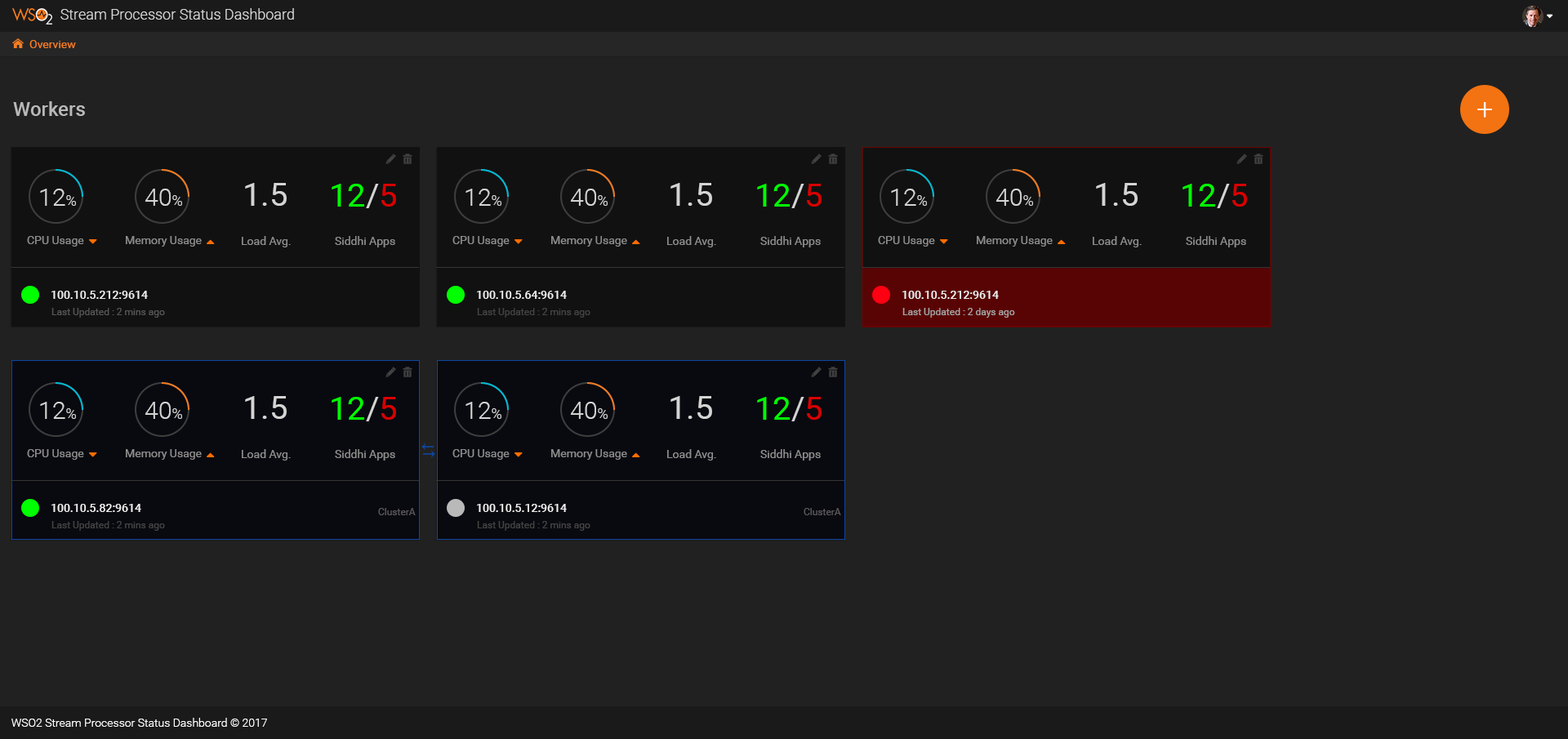
<style>
.page{position:relative;width:1568px;height:739px;background:#212121}
.page>*{position:absolute;margin:0}
.t1{font:14.7px "Roboto-Light";color:#d6d6d6}
.t2{font:11.4px "Roboto-Regular";color:#f47c22}
.t3{font:19.6px "Roboto-Medium";color:#b9b9b9}
.t4{font:29.4px "Roboto-Light";color:#ffffff}
.t5{font:32.7px "Roboto-Regular";color:#d4d4d4}
.t6{font:32.7px "Roboto-Regular";color:#00ff00}
.t7{font:32.7px "Roboto-Regular";color:#d90000}
.t8{font:24.5px "Roboto-Light";color:#d4d4d4}
.t9{font:14.7px "Roboto-Light";color:#d4d4d4}
.t10{font:11.4px "Roboto-Regular";color:#8d8d8d}
.t11{font:11.4px "Roboto-Medium";color:#eeeeee}
.t12{font:9.8px "Roboto-Regular";color:#555555}
.t13{font:9.8px "Roboto-Regular";color:#444444}
.t14{font:9.8px "Roboto-Regular";color:#a6a6a6}
.t15{font:9.8px "Roboto-Regular";color:#595959}
.t16{font:11.4px "Roboto-Light";color:#ffffff}
</style>
<div class="page">
<p class="t1" style="left:60px;top:8px;width:234px;height:12px">Stream Processor Status Dashboard</p>
<p class="t2" style="left:29px;top:40px;width:47px;height:8px">Overview</p>
<p class="t3" style="left:13px;top:101px;width:72px;height:15px">Workers</p>
<p class="t4" style="left:1477px;top:102px;width:15px;height:16px">+</p>
<p class="t5" style="left:245px;top:183px;width:42px;height:23px">1.5</p>
<p class="t6" style="left:332px;top:184px;width:64px;height:24px">12<span class="t5">/</span><span class="t7">5</span></p>
<p class="t5" style="left:670px;top:183px;width:42px;height:23px">1.5</p>
<p class="t6" style="left:757px;top:184px;width:65px;height:24px">12<span class="t5">/</span><span class="t7">5</span></p>
<p class="t5" style="left:1096px;top:183px;width:42px;height:23px">1.5</p>
<p class="t6" style="left:1183px;top:184px;width:64px;height:24px">12<span class="t5">/</span><span class="t7">5</span></p>
<p class="t8" style="left:40px;top:189px;width:36px;height:17px">12<span class="t9">%</span></p>
<p class="t8" style="left:145px;top:189px;width:37px;height:17px">40<span class="t9">%</span></p>
<p class="t8" style="left:466px;top:189px;width:35px;height:17px">12<span class="t9">%</span></p>
<p class="t8" style="left:570px;top:189px;width:38px;height:17px">40<span class="t9">%</span></p>
<p class="t8" style="left:891px;top:189px;width:36px;height:17px">12<span class="t9">%</span></p>
<p class="t8" style="left:996px;top:189px;width:37px;height:17px">40<span class="t9">%</span></p>
<p class="t10" style="left:27px;top:236px;width:57px;height:11px">CPU Usage</p>
<p class="t10" style="left:126px;top:236px;width:76px;height:11px">Memory Usage</p>
<p class="t10" style="left:242px;top:236px;width:49px;height:11px">Load Avg.</p>
<p class="t10" style="left:335px;top:236px;width:60px;height:11px">Siddhi Apps</p>
<p class="t10" style="left:452px;top:236px;width:58px;height:11px">CPU Usage</p>
<p class="t10" style="left:551px;top:236px;width:76px;height:11px">Memory Usage</p>
<p class="t10" style="left:667px;top:236px;width:49px;height:11px">Load Avg.</p>
<p class="t10" style="left:760px;top:236px;width:61px;height:11px">Siddhi Apps</p>
<p class="t10" style="left:878px;top:236px;width:57px;height:11px">CPU Usage</p>
<p class="t10" style="left:977px;top:236px;width:76px;height:11px">Memory Usage</p>
<p class="t10" style="left:1093px;top:236px;width:49px;height:11px">Load Avg.</p>
<p class="t10" style="left:1186px;top:236px;width:60px;height:11px">Siddhi Apps</p>
<p class="t11" style="left:51px;top:291px;width:97px;height:8px">100.10.5.212:9614</p>
<p class="t11" style="left:477px;top:291px;width:90px;height:8px">100.10.5.64:9614</p>
<p class="t11" style="left:902px;top:291px;width:97px;height:8px">100.10.5.212:9614</p>
<p class="t12" style="left:51px;top:308px;width:114px;height:10px">Last Updated : 2 mins ago</p>
<p class="t13" style="left:477px;top:308px;width:113px;height:10px">Last Updated : 2 mins ago</p>
<p class="t14" style="left:902px;top:308px;width:113px;height:10px">Last Updated : 2 days ago</p>
<p class="t8" style="left:40px;top:402px;width:36px;height:17px">12<span class="t9">%</span></p>
<p class="t8" style="left:145px;top:402px;width:37px;height:17px">40<span class="t9">%</span></p>
<p class="t5" style="left:245px;top:396px;width:42px;height:23px">1.5</p>
<p class="t6" style="left:332px;top:397px;width:64px;height:24px">12<span class="t5">/</span><span class="t7">5</span></p>
<p class="t8" style="left:466px;top:402px;width:35px;height:17px">12<span class="t9">%</span></p>
<p class="t8" style="left:570px;top:402px;width:38px;height:17px">40<span class="t9">%</span></p>
<p class="t5" style="left:670px;top:396px;width:42px;height:23px">1.5</p>
<p class="t6" style="left:757px;top:397px;width:65px;height:24px">12<span class="t5">/</span><span class="t7">5</span></p>
<p class="t10" style="left:27px;top:449px;width:57px;height:11px">CPU Usage</p>
<p class="t10" style="left:126px;top:449px;width:76px;height:11px">Memory Usage</p>
<p class="t10" style="left:242px;top:449px;width:49px;height:12px">Load Avg.</p>
<p class="t10" style="left:335px;top:449px;width:60px;height:12px">Siddhi Apps</p>
<p class="t10" style="left:452px;top:449px;width:58px;height:11px">CPU Usage</p>
<p class="t10" style="left:551px;top:449px;width:76px;height:11px">Memory Usage</p>
<p class="t10" style="left:667px;top:449px;width:49px;height:12px">Load Avg.</p>
<p class="t10" style="left:760px;top:449px;width:61px;height:12px">Siddhi Apps</p>
<p class="t11" style="left:51px;top:504px;width:90px;height:8px">100.10.5.82:9614</p>
<p class="t15" style="left:378px;top:508px;width:38px;height:7px">ClusterA</p>
<p class="t11" style="left:477px;top:504px;width:90px;height:8px">100.10.5.12:9614</p>
<p class="t15" style="left:804px;top:508px;width:37px;height:7px">ClusterA</p>
<p class="t13" style="left:51px;top:521px;width:114px;height:10px">Last Updated : 2 mins ago</p>
<p class="t13" style="left:477px;top:521px;width:113px;height:10px">Last Updated : 2 mins ago</p>
<p class="t16" style="left:11px;top:718px;width:256px;height:9px">WSO2 Stream Processor Status Dashboard © 2017</p>
</div>
